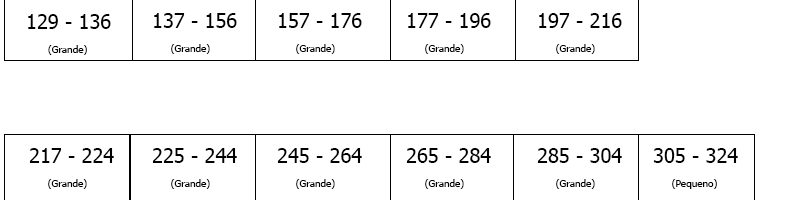
<style>
.page{position:relative;width:800px;height:200px;background:#ffffff}
.page>*{position:absolute;margin:0}
.t1{font:20px "Tahoma";color:#000000}
.t2{font:10px "Tahoma";color:#000000}
</style>
<div class="page">
<p class="t1" style="left:28px;top:14px;width:83px;height:41px">129 - 136<br><span class="t2">       (Grande)</span></p>
<p class="t1" style="left:154px;top:13px;width:83px;height:41px">137 - 156 <br>   <span class="t2">(Grande)</span></p>
<p class="t1" style="left:279px;top:13px;width:83px;height:41px">157 - 176 <br>   <span class="t2">(Grande)</span></p>
<p class="t1" style="left:408px;top:13px;width:83px;height:41px">177 - 196 <br>   <span class="t2">(Grande)</span></p>
<p class="t1" style="left:539px;top:13px;width:83px;height:41px">197 - 216 <br>   <span class="t2">(Grande)</span></p>
<p class="t1" style="left:29px;top:148px;width:85px;height:41px">217 - 224 <br>   <span class="t2">(Grande)</span></p>
<p class="t1" style="left:152px;top:148px;width:85px;height:41px">225 - 244 <br>   <span class="t2">(Grande)</span></p>
<p class="t1" style="left:277px;top:148px;width:85px;height:41px">245 - 264 <br>   <span class="t2">(Grande)</span></p>
<p class="t1" style="left:406px;top:148px;width:85px;height:41px">265 - 284 <br>   <span class="t2">(Grande)</span></p>
<p class="t1" style="left:537px;top:148px;width:85px;height:41px">285 - 304 <br>   <span class="t2">(Grande)</span></p>
<p class="t1" style="left:653px;top:148px;width:85px;height:41px">305 - 324 <br>   <span class="t2">(Pequeno)</span></p>
</div>
